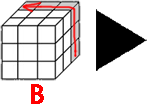
<style>
.page{position:relative;width:162px;height:108px;background:#ffffff}
.page>*{position:absolute;margin:0}
.t1{font:27px "MyriadPro-Regular";color:#ff0000;font-weight:bold}
</style>
<div class="page">
<p class="t1" style="left:31px;top:84px;width:13px;height:20px">B</p>
</div>
